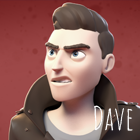
<style>
.page{position:relative;width:140px;height:140px}
.page>*{position:absolute;margin:0}
.t1{font:32px "AmaticSC-Regular";color:#ffffff}
</style>
<div class="page">
<p class="t1" style="left:94px;top:105px;width:39px;height:26px">Dave</p>
</div>
